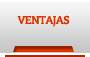
<style>
.page{position:relative;width:90px;height:57px}
.page>*{position:absolute;margin:0}
.t1{font:11px "Congress-Bold";color:#e03400;text-transform:uppercase}
</style>
<div class="page">
<p class="t1" style="left:17px;top:15px;width:53px;height:12px">Ventajas</p>
</div>
